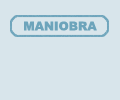
<style>
.page{position:relative;width:120px;height:100px;background:#d8e5eb}
.page>*{position:absolute;margin:0}
.t1{font:12px "Arial-Black";color:#6da4bb}
</style>
<div class="page">
<p class="t1" style="left:24px;top:21px;width:73px;height:10px">MANIOBRA</p>
</div>
